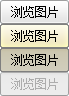
<style>
.page{position:relative;width:69px;height:96px}
.page>*{position:absolute;margin:0}
.t1{font:12px/24px "SimSun";color:#000000}
.t2{font:12px/24px "SimSun";color:#adadad}
</style>
<div class="page">
<p class="t1" style="left:11px;top:6px;width:47px;height:84px">浏览图片<br>浏览图片<br>浏览图片<br><span class="t2">浏览图片</span></p>
</div>
